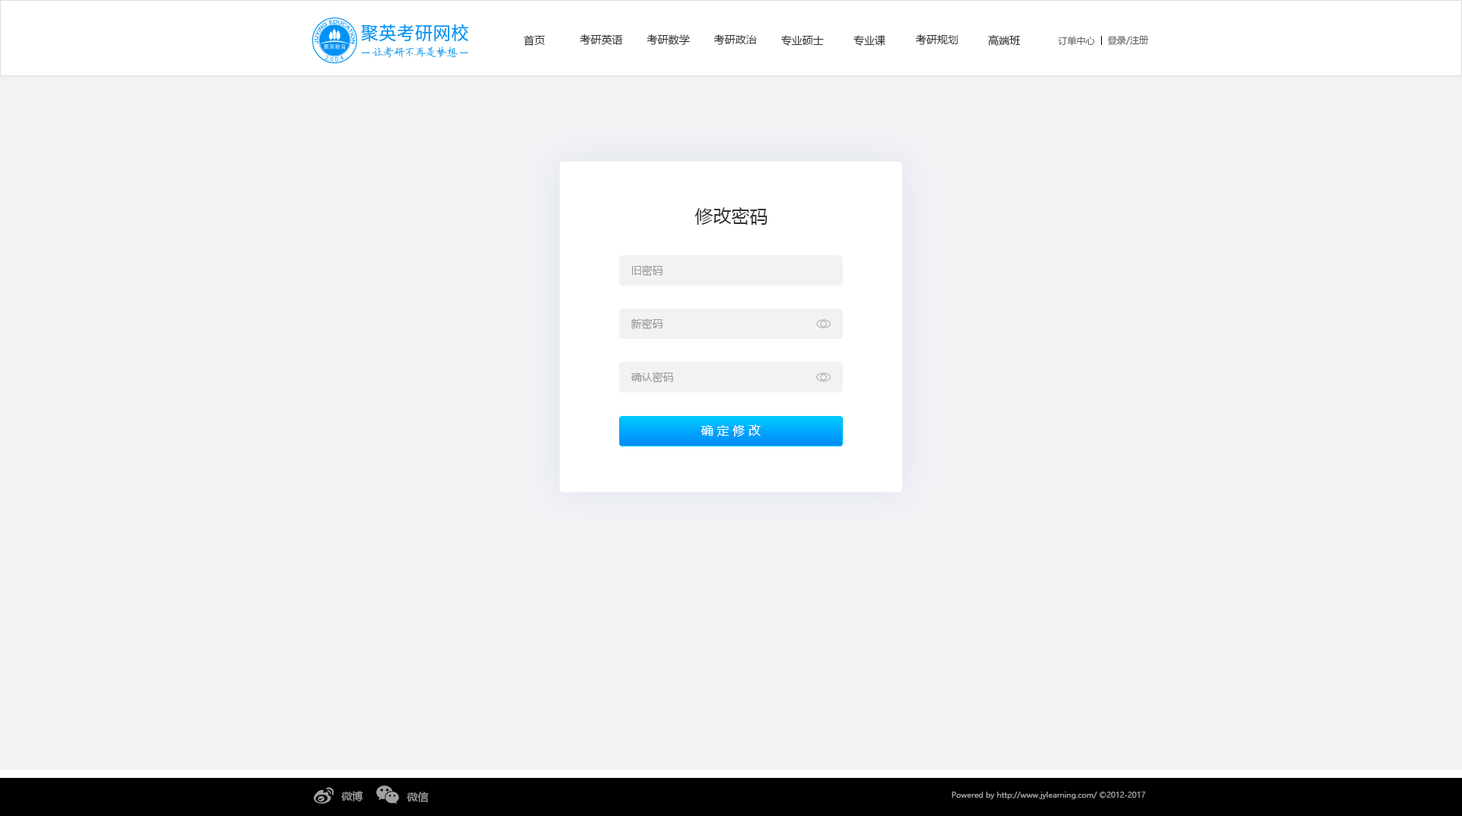
<style>
.page{position:relative;width:1462px;height:816px;background:#f2f2f5}
.page>*{position:absolute;margin:0}
.t1{font:10.7px "MicrosoftYaHei";color:#333333}
.t2{font:9.1px "MicrosoftYaHei";color:#666666}
.t3{font:18.3px "MicrosoftYaHei";color:#333333}
.t4{font:10.7px "MicrosoftYaHei";color:#999999}
.t5{font:12.2px "MicrosoftYaHei";color:#ffffff}
.t6{font:10.7px "MicrosoftYaHei";color:#a1a1a1}
.t7{font:7.6px "MicrosoftYaHei";color:#a1a1a1}
</style>
<div class="page">
<p class="t1" style="left:524px;top:35px;width:21px;height:11px">首页</p>
<p class="t1" style="left:580px;top:34px;width:43px;height:11px">考研英语</p>
<p class="t1" style="left:647px;top:34px;width:43px;height:11px">考研数学</p>
<p class="t1" style="left:714px;top:34px;width:43px;height:11px">考研政治</p>
<p class="t1" style="left:781px;top:35px;width:43px;height:11px">专业硕士</p>
<p class="t1" style="left:854px;top:35px;width:32px;height:11px">专业课</p>
<p class="t1" style="left:915px;top:34px;width:43px;height:11px">考研规划</p>
<p class="t1" style="left:988px;top:35px;width:32px;height:11px">高端班</p>
<p class="t2" style="left:1058px;top:36px;width:37px;height:10px">订单中心</p>
<p class="t2" style="left:1107px;top:36px;width:41px;height:9px">登录/注册</p>
<p class="t3" style="left:694px;top:207px;width:74px;height:18px">修改密码</p>
<p class="t4" style="left:632px;top:265px;width:31px;height:11px">旧密码</p>
<p class="t4" style="left:631px;top:318px;width:32px;height:11px">新密码</p>
<p class="t4" style="left:631px;top:372px;width:43px;height:10px">确认密码</p>
<p class="t5" style="left:701px;top:424px;width:60px;height:12px">确 定 修 改</p>
<p class="t6" style="left:341px;top:790px;width:22px;height:11px">微博</p>
<p class="t6" style="left:407px;top:791px;width:22px;height:11px">微信</p>
<p class="t7" style="left:952px;top:791px;width:193px;height:8px">Powered by http://www.jylearning.com/ ©2012-2017</p>
</div>
